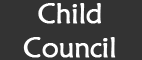
<style>
.page{position:relative;width:142px;height:60px;background:#333333}
.page>*{position:absolute;margin:0}
.t1{font:28px "MaiandraGD-Regular";letter-spacing:-0.025em;color:#ffffff;font-weight:bold}
</style>
<div class="page">
<p class="t1" style="left:23px;top:3px;width:93px;height:55px;text-align:center">Child<br>Council</p>
</div>
